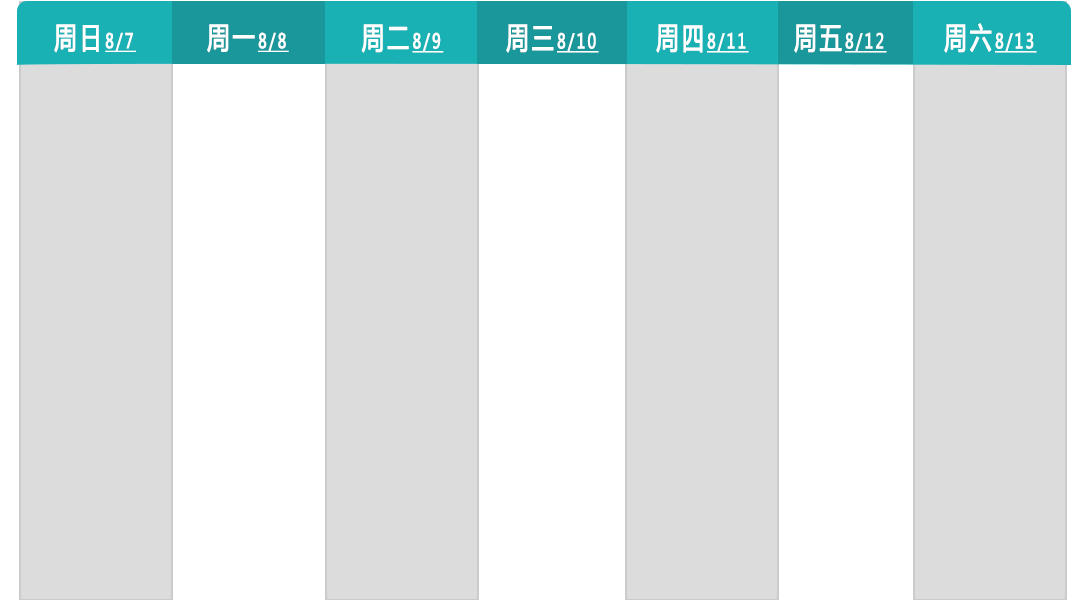
<style>
.page{position:relative;width:1085px;height:600px;background:#dcdcdc}
.page>*{position:absolute;margin:0}
.t1{font:19.7px "MicrosoftYaHei";letter-spacing:0.14em;color:#ffffff;text-transform:uppercase;font-weight:bold;text-decoration:underline;scale:0.73 1}
.t2{font:29.6px "MicrosoftYaHei";letter-spacing:0.14em;color:#ffffff;text-transform:uppercase;font-weight:bold;scale:0.73 1}
.t3{font:20px "MicrosoftYaHei";letter-spacing:0.14em;color:#ffffff;text-transform:uppercase;font-weight:bold;text-decoration:underline;scale:0.72 1}
.t4{font:30px "MicrosoftYaHei";letter-spacing:0.14em;color:#ffffff;text-transform:uppercase;font-weight:bold;scale:0.72 1}
</style>
<div class="page">
<p class="t1" style="left:54px;top:24px;width:82px;height:29px"><span class="t2">周日</span>8/7</p>
<p class="t1" style="left:207px;top:24px;width:82px;height:29px"><span class="t2">周一</span>8/8</p>
<p class="t3" style="left:361px;top:24px;width:83px;height:29px"><span class="t4">周二</span>8/9</p>
<p class="t3" style="left:506px;top:24px;width:93px;height:29px"><span class="t4">周三</span>8/10</p>
<p class="t3" style="left:656px;top:24px;width:93px;height:29px"><span class="t4">周四</span>8/11</p>
<p class="t3" style="left:794px;top:24px;width:93px;height:29px"><span class="t4">周五</span>8/12</p>
<p class="t3" style="left:944px;top:23px;width:93px;height:30px"><span class="t4">周六</span>8/13</p>
</div>
